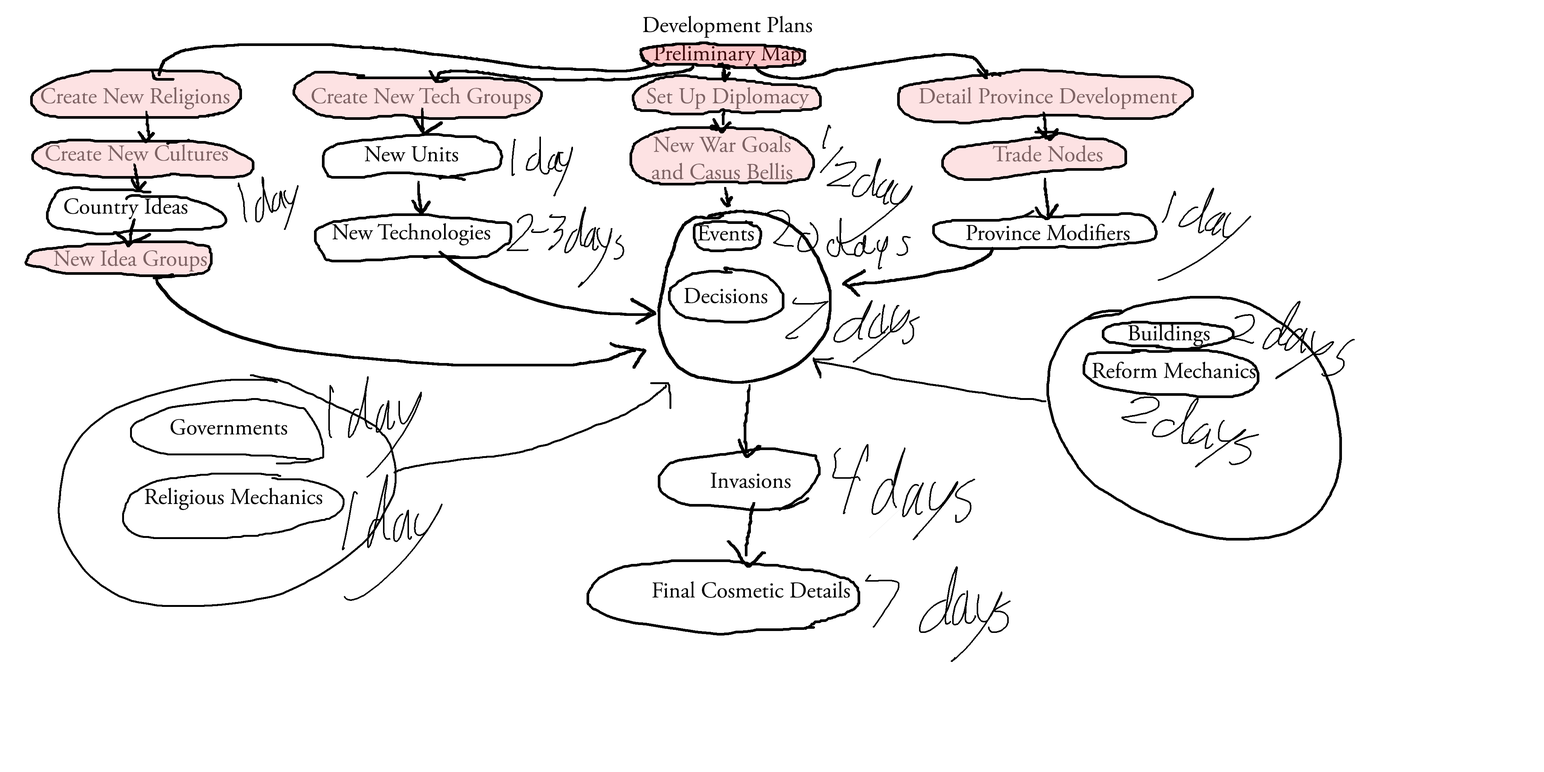
<style>
.page{position:relative;width:1544px;height:772px;background:#ffffff}
.page>*{position:absolute;margin:0}
.t1{font:22.6px "AGaramondPro-Regular";color:#000000}
.t2{font:22.6px "AGaramondPro-Regular";color:#3c0709}
.t3{font:22.6px "AGaramondPro-Regular";color:#7e6364}
</style>
<div class="page">
<p class="t1" style="left:643px;top:15px;width:169px;height:23px">Development Plans</p>
<p class="t2" style="left:654px;top:44px;width:147px;height:22px">Preliminary Map</p>
<p class="t3" style="left:41px;top:87px;width:189px;height:22px">Create New Religions</p>
<p class="t3" style="left:311px;top:87px;width:220px;height:22px">Create New Tech Groups</p>
<p class="t3" style="left:647px;top:87px;width:162px;height:22px">Set Up Diplomacy</p>
<p class="t3" style="left:919px;top:87px;width:258px;height:22px">Detail Province Development</p>
<p class="t3" style="left:652px;top:135px;width:141px;height:45px;text-align:center">New War Goals<br>and Casus Bellis</p>
<p class="t3" style="left:46px;top:144px;width:182px;height:17px">Create New Cultures</p>
<p class="t1" style="left:365px;top:146px;width:93px;height:16px">New Units</p>
<p class="t3" style="left:993px;top:145px;width:110px;height:17px">Trade Nodes</p>
<p class="t1" style="left:64px;top:197px;width:124px;height:22px">Country Ideas</p>
<p class="t1" style="left:332px;top:223px;width:159px;height:22px">New Technologies</p>
<p class="t1" style="left:698px;top:225px;width:56px;height:16px">Events</p>
<p class="t1" style="left:966px;top:224px;width:164px;height:17px">Province Modifiers</p>
<p class="t3" style="left:54px;top:249px;width:153px;height:23px">New Idea Groups</p>
<p class="t1" style="left:684px;top:288px;width:84px;height:16px">Decisions</p>
<p class="t1" style="left:1128px;top:324px;width:82px;height:22px">Buildings</p>
<p class="t1" style="left:1093px;top:362px;width:163px;height:17px">Reform Mechanics</p>
<p class="t1" style="left:170px;top:419px;width:117px;height:16px">Governments</p>
<p class="t1" style="left:711px;top:473px;width:80px;height:15px">Invasions</p>
<p class="t1" style="left:145px;top:487px;width:177px;height:23px">Religious Mechanics</p>
<p class="t1" style="left:652px;top:581px;width:198px;height:17px">Final Cosmetic Details</p>
</div>
